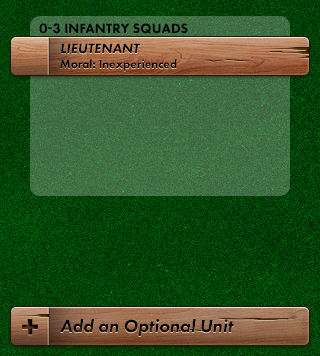
<style>
.page{position:relative;width:320px;height:356px}
.page>*{position:absolute;margin:0}
.t1{font:14px "FuturaPT-Heavy";color:#010101;text-transform:uppercase}
.t2{font:14px "FuturaPT-HeavyObl";color:#000000;text-transform:uppercase}
.t3{font:12px "FuturaPT-Heavy";color:#000000}
.t4{font:18px "FuturaPT-HeavyObl"}
</style>
<div class="page">
<p class="t1" style="left:39px;top:23px;width:149px;height:11px">0-3 Infantry Squads</p>
<p class="t2" style="left:61px;top:43px;width:80px;height:11px">Lieutenant</p>
<p class="t3" style="left:60px;top:59px;width:117px;height:12px">Moral: Inexperienced</p>
<p class="t4" style="left:60px;top:319px;width:174px;height:17px">Add an Optional Unit</p>
</div>
